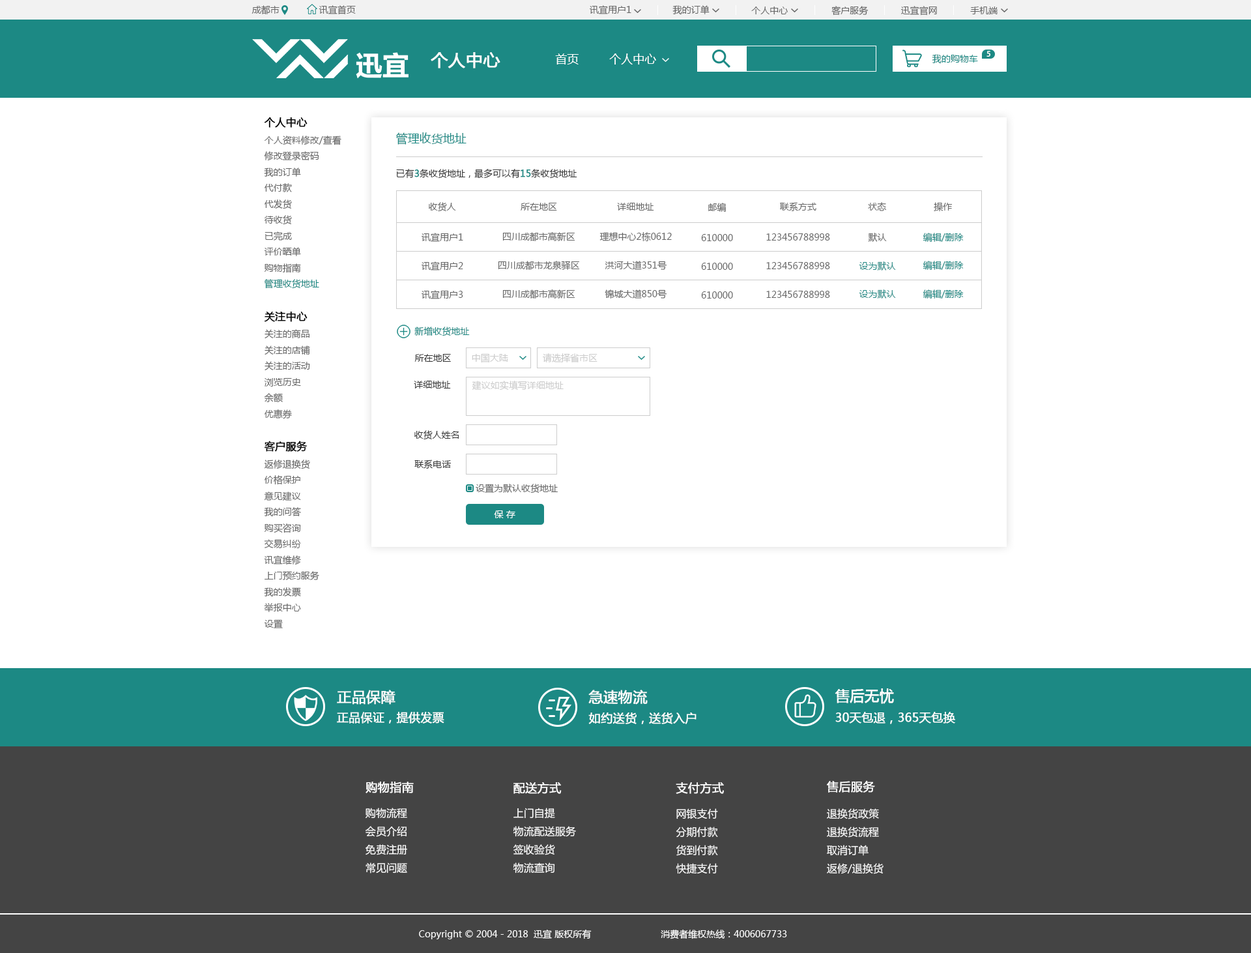
<style>
.page{position:relative;width:1251px;height:953px;background:#ffffff}
.page>*{position:absolute;margin:0}
.t1{font:9.1px "MicrosoftYaHei";color:#666666}
.t2{font:16.9px "MicrosoftYaHei";color:#ffffff;font-weight:bold}
.t3{font:11.7px "MicrosoftYaHei";color:#ffffff}
.t4{font:7.8px "AdobeHeitiStd-Regular";color:#ffffff}
.t5{font:9.1px "MicrosoftYaHei";color:#1c8984}
.t6{font:10.4px "MicrosoftYaHei";color:#666666;font-weight:bold}
.t7{font:10.4px "MicrosoftYaHei";color:#000000;font-weight:bold}
.t8{font:11.7px "MicrosoftYaHei";color:#1c8984}
.t9{font:9.1px "MicrosoftYaHei";color:#333333}
.t10{font:9.1px "MicrosoftYaHei";color:#1c8984;font-weight:bold}
.t11{font:9.1px "MicrosoftYaHei";color:#cccccc}
.t12{font:9.1px "MicrosoftYaHei";color:#ffffff}
.t13{font:14.3px "MicrosoftYaHei";color:#ffffff;font-weight:bold}
.t14{font:11.7px "MicrosoftYaHei";color:#ffffff;font-weight:bold}
.t15{font:10.4px "MicrosoftYaHei";color:#ffffff}
</style>
<div class="page">
<p class="t1" style="left:252px;top:5px;width:28px;height:9px">成都市</p>
<p class="t1" style="left:319px;top:5px;width:37px;height:9px">讯宜首页</p>
<p class="t1" style="left:590px;top:5px;width:42px;height:9px">讯宜用户1</p>
<p class="t1" style="left:673px;top:5px;width:37px;height:10px">我的订单</p>
<p class="t1" style="left:832px;top:6px;width:37px;height:9px">客户服务</p>
<p class="t1" style="left:901px;top:6px;width:36px;height:10px">迅宜官网</p>
<p class="t1" style="left:751px;top:7px;width:37px;height:7px">个人中心</p>
<p class="t1" style="left:970px;top:7px;width:29px;height:7px">手机端</p>
<p class="t2" style="left:431px;top:52px;width:70px;height:16px">个人中心</p>
<p class="t3" style="left:555px;top:53px;width:24px;height:12px">首页</p>
<p class="t3" style="left:609px;top:53px;width:47px;height:12px">个人中心</p>
<p class="t4" style="left:987px;top:51px;width:4px;height:6px">5</p>
<p class="t5" style="left:932px;top:54px;width:46px;height:10px">我的购物车</p>
<p class="t1" style="left:264px;top:117px;width:78px;height:511px"><span class="t6"><br></span><span class="t7">个人中心<br></span>个人资料修改/查看<br>修改登录密码<br>我的订单<br>代付款<br>代发货<br>待收货<br>已完成<br>评价晒单<br>购物指南<br><span class="t5">管理收货地址<br><br></span><span class="t7">关注中心<br></span>关注的商品<br>关注的店铺 <br>关注的活动<br>浏览历史<br>余额<br>优惠券<br><br><span class="t7">客户服务<br></span>返修退换货<br>价格保护<br>意见建议<br>我的问答<br>购买咨询<br>交易纠纷<br>讯宜维修<br>上门预约服务<br>我的发票<br>举报中心<br>设置</p>
<p class="t8" style="left:396px;top:132px;width:71px;height:13px">管理收货地址</p>
<p class="t9" style="left:396px;top:169px;width:181px;height:10px">已有<span class="t10">3</span>条收货地址，最多可以有<span class="t10">15</span>条收货地址</p>
<p class="t1" style="left:429px;top:202px;width:27px;height:10px">收货人</p>
<p class="t1" style="left:521px;top:203px;width:36px;height:8px">所在地区</p>
<p class="t1" style="left:617px;top:203px;width:37px;height:8px">详细地址</p>
<p class="t1" style="left:708px;top:203px;width:18px;height:9px">邮编</p>
<p class="t1" style="left:780px;top:202px;width:37px;height:9px">联系方式</p>
<p class="t1" style="left:868px;top:202px;width:18px;height:9px">状态</p>
<p class="t1" style="left:934px;top:202px;width:19px;height:10px">操作</p>
<p class="t1" style="left:422px;top:233px;width:41px;height:9px">讯宜用户1</p>
<p class="t1" style="left:503px;top:232px;width:73px;height:9px">四川成都市高新区</p>
<p class="t1" style="left:600px;top:232px;width:72px;height:9px">理想中心2栋0612</p>
<p class="t1" style="left:701px;top:234px;width:32px;height:7px">610000</p>
<p class="t1" style="left:766px;top:233px;width:64px;height:8px">123456788998</p>
<p class="t1" style="left:868px;top:233px;width:19px;height:9px">默认</p>
<p class="t5" style="left:923px;top:233px;width:41px;height:9px">编辑/删除</p>
<p class="t1" style="left:422px;top:261px;width:41px;height:9px">讯宜用户2</p>
<p class="t1" style="left:498px;top:261px;width:82px;height:9px">四川成都市龙泉驿区</p>
<p class="t1" style="left:605px;top:261px;width:62px;height:9px">洪河大道351号</p>
<p class="t1" style="left:701px;top:263px;width:32px;height:7px">610000</p>
<p class="t1" style="left:766px;top:262px;width:64px;height:7px">123456788998</p>
<p class="t5" style="left:859px;top:261px;width:37px;height:9px">设为默认</p>
<p class="t5" style="left:923px;top:261px;width:41px;height:9px">编辑/删除</p>
<p class="t1" style="left:422px;top:290px;width:41px;height:9px">讯宜用户3</p>
<p class="t1" style="left:503px;top:289px;width:73px;height:10px">四川成都市高新区</p>
<p class="t1" style="left:605px;top:289px;width:62px;height:10px">锦城大道850号</p>
<p class="t1" style="left:701px;top:291px;width:32px;height:8px">610000</p>
<p class="t1" style="left:766px;top:291px;width:64px;height:7px">123456788998</p>
<p class="t5" style="left:859px;top:289px;width:37px;height:10px">设为默认</p>
<p class="t5" style="left:923px;top:289px;width:41px;height:10px">编辑/删除</p>
<p class="t5" style="left:415px;top:327px;width:55px;height:9px">新增收货地址</p>
<p class="t9" style="left:415px;top:354px;width:36px;height:8px">所在地区</p>
<p class="t11" style="left:472px;top:353px;width:36px;height:10px">中国大陆</p>
<p class="t11" style="left:543px;top:353px;width:55px;height:9px">请选择省市区</p>
<p class="t9" style="left:414px;top:381px;width:37px;height:7px">详细地址</p>
<p class="t11" style="left:473px;top:381px;width:91px;height:9px">建议如实填写详细地址</p>
<p class="t9" style="left:415px;top:430px;width:44px;height:10px">收货人姓名</p>
<p class="t9" style="left:415px;top:459px;width:37px;height:10px">联系电话</p>
<p class="t1" style="left:476px;top:484px;width:82px;height:9px">设置为默认收货地址</p>
<p class="t12" style="left:494px;top:510px;width:22px;height:8px">保 存</p>
<p class="t13" style="left:337px;top:690px;width:59px;height:15px">正品保障</p>
<p class="t13" style="left:589px;top:690px;width:59px;height:15px">急速物流</p>
<p class="t13" style="left:835px;top:688px;width:59px;height:16px">售后无忧</p>
<p class="t14" style="left:337px;top:712px;width:108px;height:11px">正品保证，提供发票</p>
<p class="t14" style="left:589px;top:712px;width:108px;height:12px">如约送货，送货入户</p>
<p class="t14" style="left:836px;top:712px;width:119px;height:12px">30天包退，365天包换</p>
<p class="t14" style="left:366px;top:781px;width:48px;height:12px">购物指南</p>
<p class="t14" style="left:514px;top:782px;width:48px;height:12px">配送方式</p>
<p class="t14" style="left:676px;top:782px;width:48px;height:12px">支付方式</p>
<p class="t14" style="left:827px;top:780px;width:48px;height:13px">售后服务</p>
<p class="t15" style="left:366px;top:808px;width:41px;height:65px">购物流程<br>会员介绍<br>免费注册<br>常见问题</p>
<p class="t15" style="left:513px;top:808px;width:63px;height:65px">上门自提<br>物流配送服务<br>签收验货<br>物流查询</p>
<p class="t15" style="left:676px;top:808px;width:42px;height:66px">网银支付<br>分期付款<br>货到付款<br>快捷支付</p>
<p class="t15" style="left:827px;top:808px;width:57px;height:66px">退换货政策<br>退换货流程<br>取消订单<br>返修/退换货</p>
<p class="t12" style="left:419px;top:929px;width:173px;height:10px">Copyright © 2004 - 2018  迅宜 版权所有</p>
<p class="t12" style="left:661px;top:929px;width:126px;height:10px">消费者维权热线：4006067733</p>
</div>
